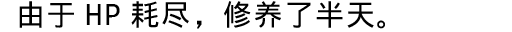
<style>
.page{position:relative;width:512px;height:32px;background:#ffffff}
.page>*{position:absolute;margin:0}
.t1{font:29.3px "WenQuanYiMicroHeiMono";letter-spacing:0.05em;color:#000000}
</style>
<div class="page">
<p class="t1" style="left:19px;top:1px;width:366px;height:28px">由于HP耗尽，修养了半天。</p>
</div>
